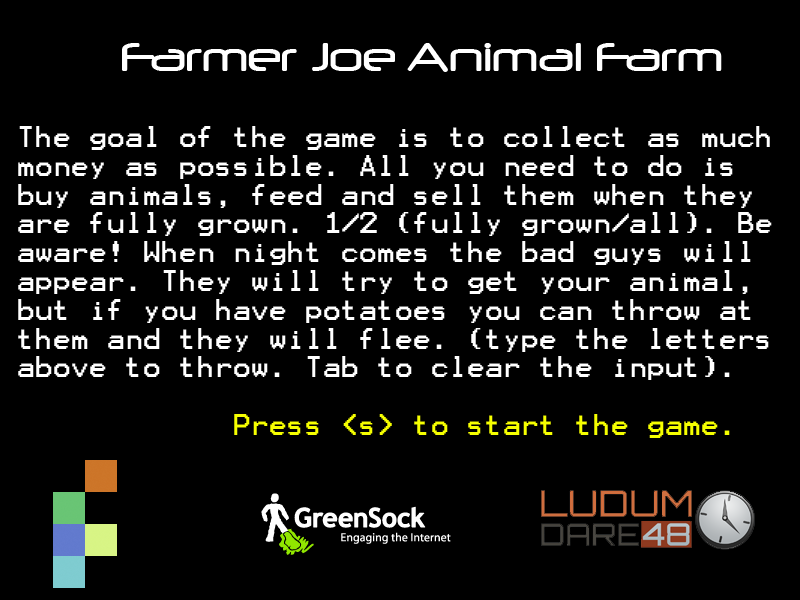
<style>
.page{position:relative;width:800px;height:600px;background:#000000}
.page>*{position:absolute;margin:0}
.t1{font:48px "Neuropol";color:#ffffff}
.t2{font:24px "Terminal";color:#ffffff}
.t3{font:24px "Terminal";color:#f6ff00}
</style>
<div class="page">
<p class="t1" style="left:122px;top:43px;width:600px;height:29px">Farmer Joe Animal Farm</p>
<p class="t2" style="left:18px;top:126px;width:754px;height:312px">The goal of the game is to collect as much money as possible. All you need to do is buy animals, feed and sell them when they are fully grown. 1/2 (fully grown/all). Be aware! When night comes the bad guys will appear. They will try to get your animal, but if you have potatoes you can throw at them and they will flee. (type the letters above to throw. Tab to clear the input).<br>      <br>      <span class="t3">Press &lt;s&gt; to start the game.</span></p>
</div>
